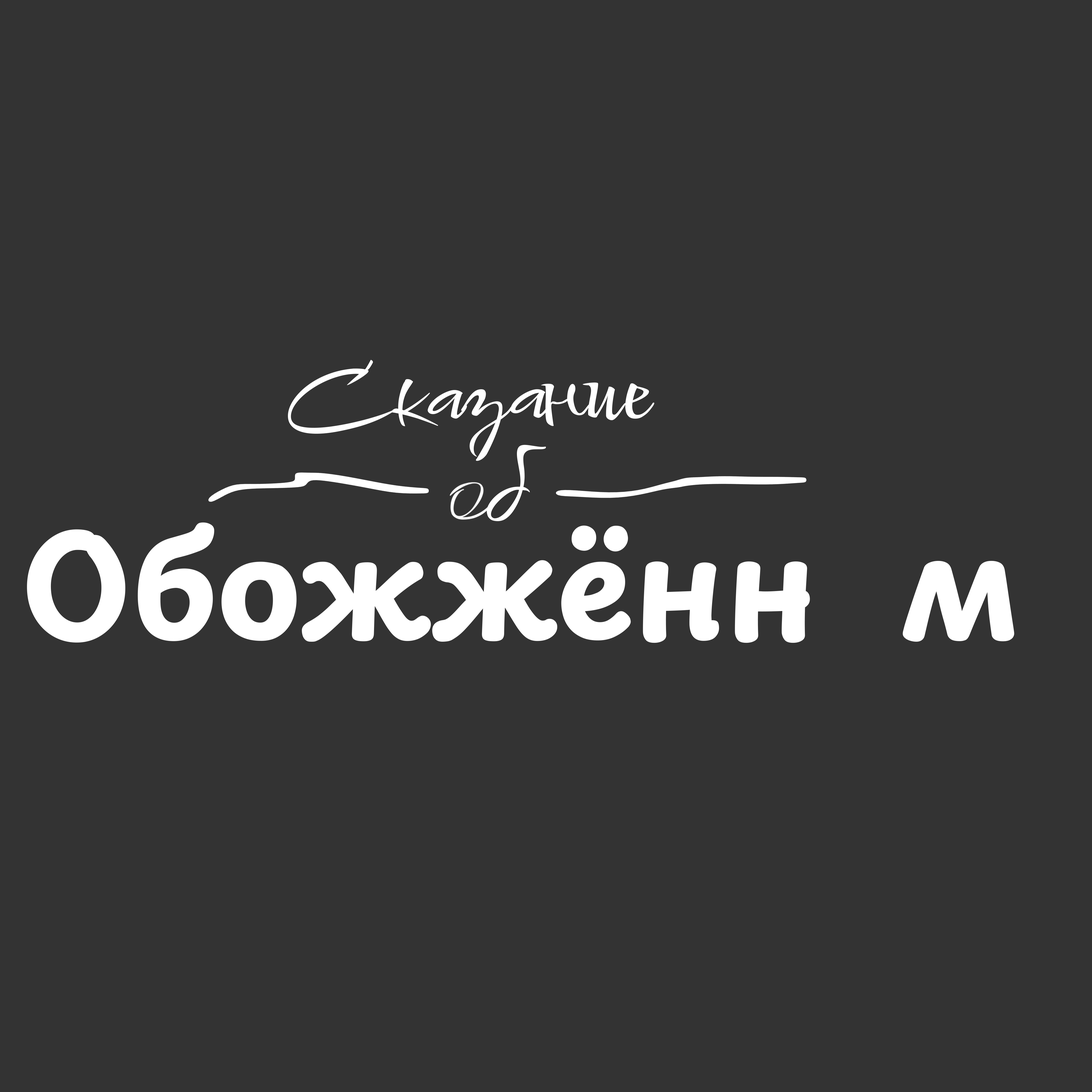
<style>
.page{position:relative;width:1092px;height:1092px;background:#333333}
.page>*{position:absolute;margin:0}
.t1{font:83.4px "Comforter-Regular";color:#ffffff;scale:1.43 1}
.t2{font:117.8px "Comforter-Regular";color:#ffffff}
.t3{font:141.2px "PlaypenSans-Bold";color:#ffffff}
</style>
<div class="page">
<p class="t1" style="left:288px;top:360px;width:366px;height:101px;rotate:-1deg">Сказание</p>
<p class="t2" style="left:487px;top:445px;width:59px;height:76px">б</p>
<p class="t3" style="left:27px;top:522px;width:987px;height:121px">Обожжённ  м</p>
</div>
